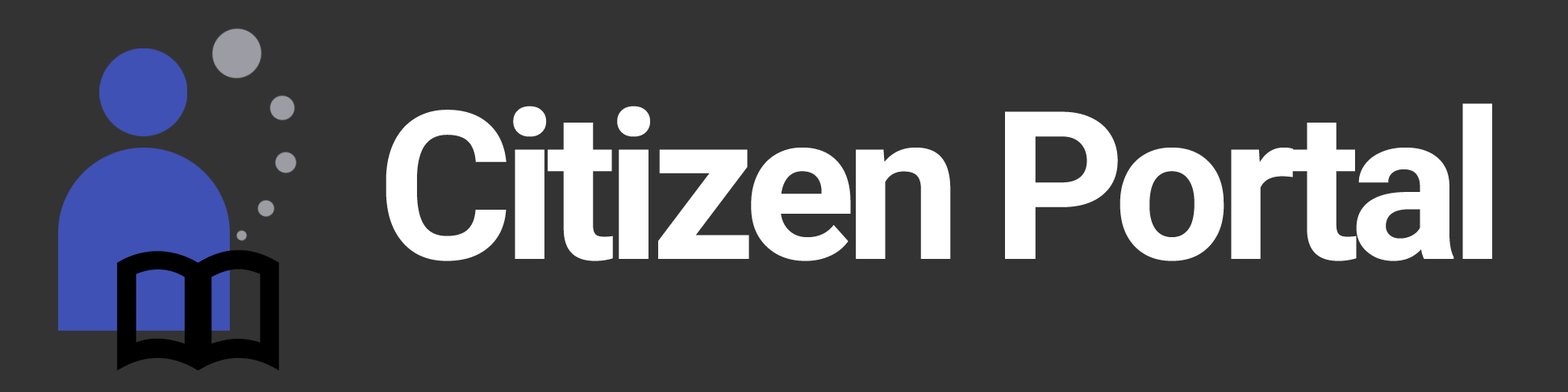
<style>
.page{position:relative;width:1568px;height:392px;background:#333333}
.page>*{position:absolute;margin:0}
.t1{font:206.7px "Roboto-Bold";letter-spacing:-0.05em;color:#ffffff}
</style>
<div class="page">
<p class="t1" style="left:386px;top:103px;width:1106px;height:158px">Citizen Portal</p>
</div>
